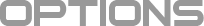
<style>
.page{position:relative;width:204px;height:26px;background:#999999}
.page>*{position:absolute;margin:0}
.t1{font:50px "Bitsumishi";color:#999999}
</style>
<div class="page">
<p class="t1" style="left:0px;top:0px;width:204px;height:26px">options</p>
</div>
